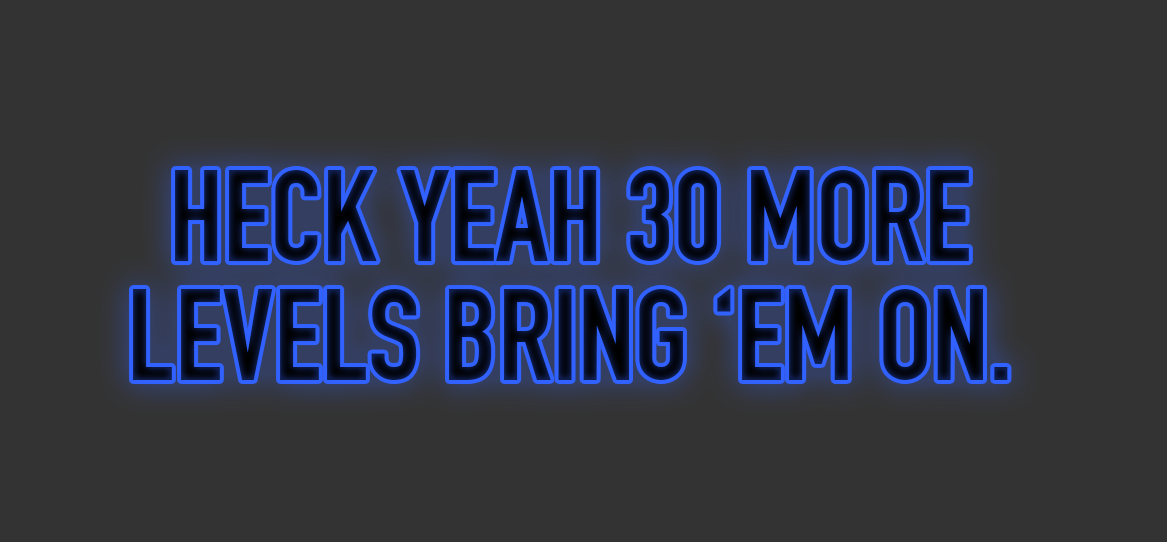
<style>
.page{position:relative;width:1167px;height:542px;background:#333333}
.page>*{position:absolute;margin:0}
.t1{font:127.5px/118.8px "DINEngschrift";color:#060c20;text-transform:uppercase}
</style>
<div class="page">
<p class="t1" style="left:133px;top:170px;width:875px;height:210px;text-align:center">Heck yeah 30 more <br>levels bring ‘em on.</p>
</div>
